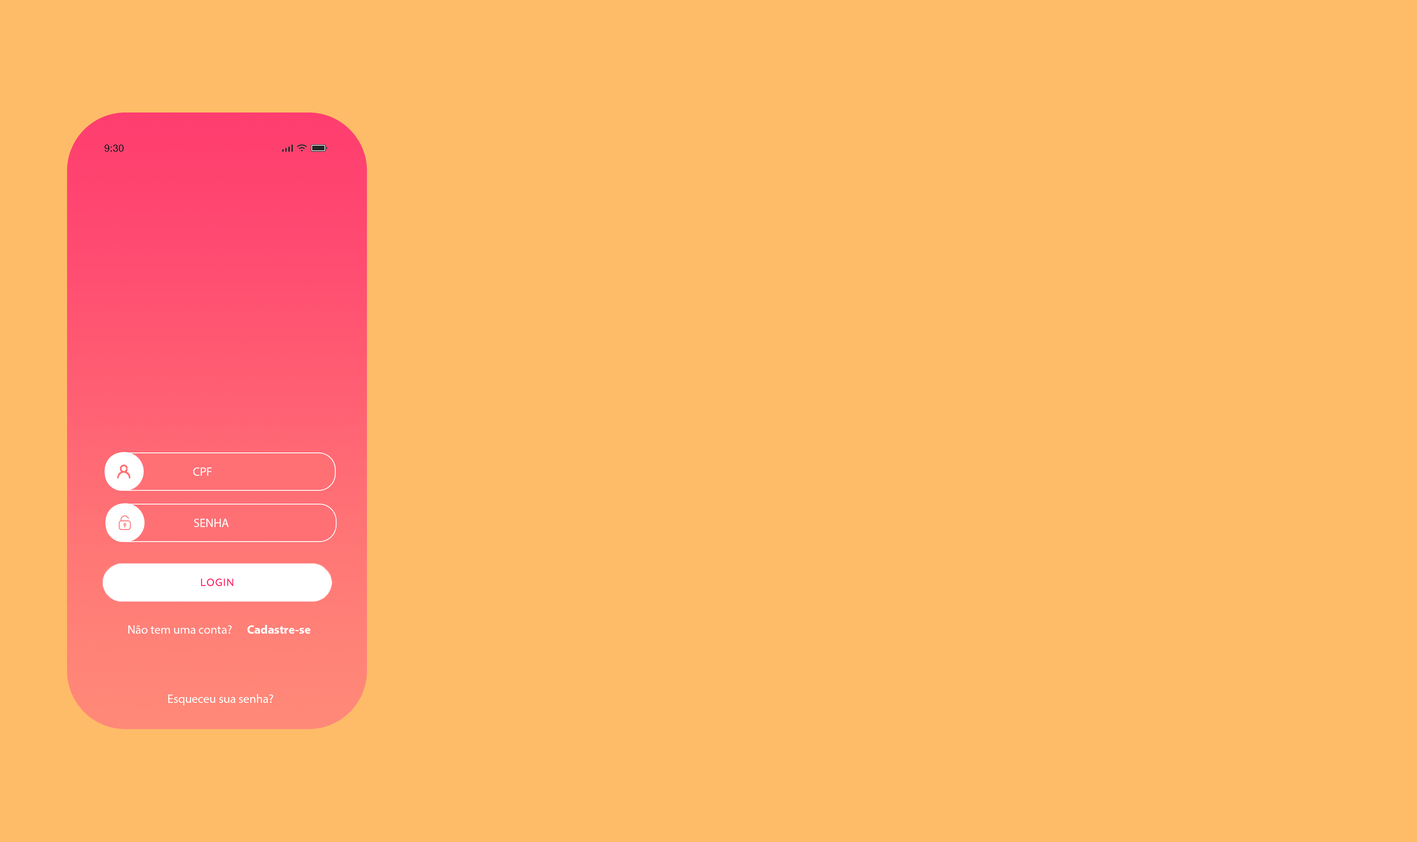
<style>
.page{position:relative;width:1417px;height:842px;background:#febc68}
.page>*{position:absolute;margin:0}
.t1{font:12.1px "MyriadPro-Regular";color:#ffffff}
.t2{font:12.1px "MyriadPro-Bold";color:#ffffff}
</style>
<div class="page">
<p class="t1" style="left:193px;top:467px;width:19px;height:9px">CPF</p>
<p class="t1" style="left:194px;top:518px;width:35px;height:9px">SENHA</p>
<p class="t1" style="left:128px;top:625px;width:104px;height:8px">Não tem uma conta?</p>
<p class="t2" style="left:247px;top:625px;width:63px;height:8px">Cadastre-se</p>
<p class="t1" style="left:168px;top:694px;width:105px;height:11px">Esqueceu sua senha?</p>
</div>
